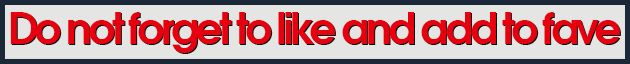
<style>
.page{position:relative;width:630px;height:64px;background:#e5e5e3}
.page>*{position:absolute;margin:0}
.t1{font:42.7px "AvantGardeGothicC-Demi";letter-spacing:-0.07em;color:#e7000d}
</style>
<div class="page">
<p class="t1" style="left:10px;top:12px;width:610px;height:41px">Do not forget to like and add to fave</p>
</div>
